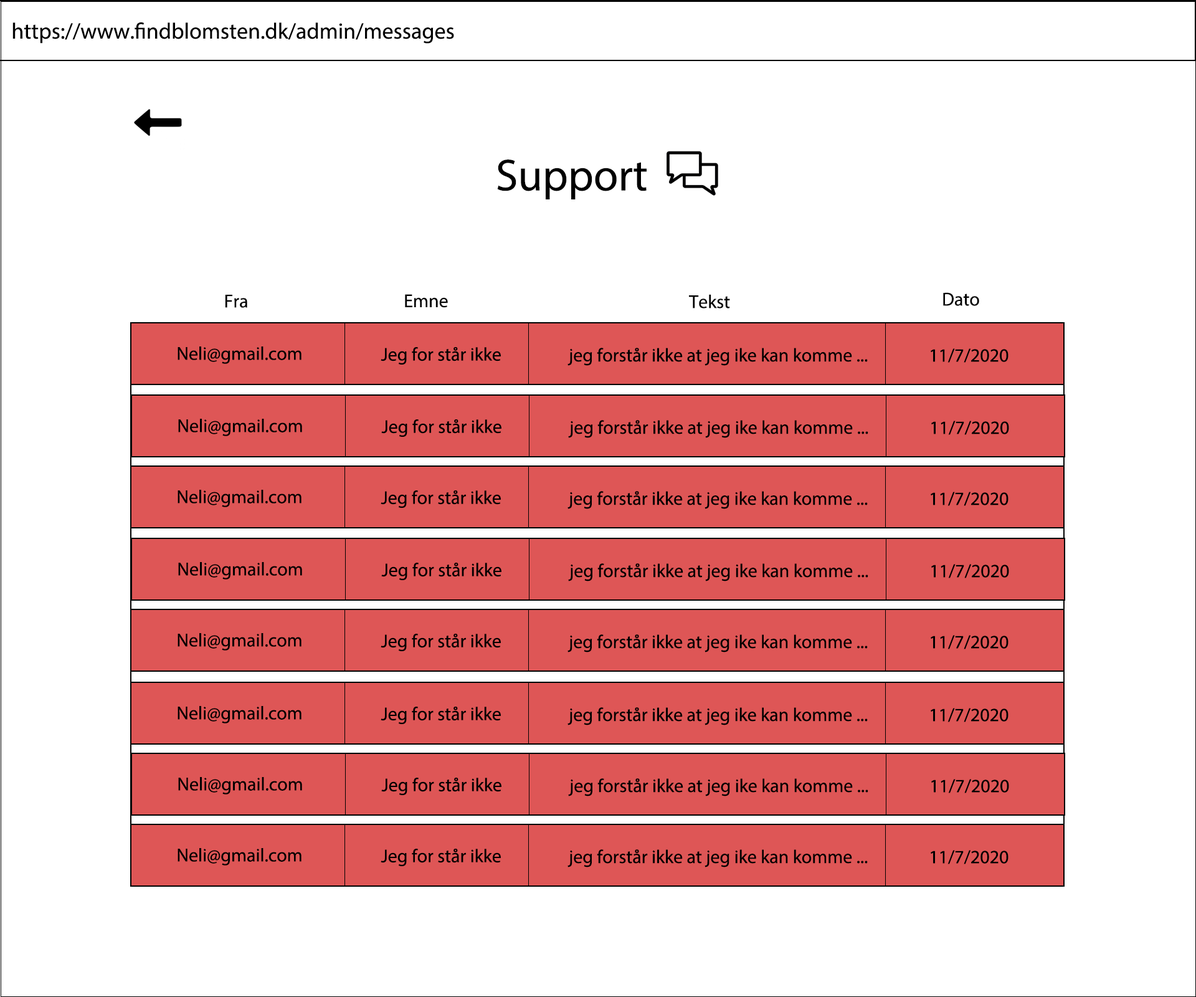
<style>
.page{position:relative;width:1196px;height:997px;background:#ffffff}
.page>*{position:absolute;margin:0}
.t1{font:22.4px "MyriadPro-Regular";color:#000000}
.t2{font:44.9px "MyriadPro-Regular";color:#000000}
.t3{font:18.7px "MyriadPro-Regular";color:#000000}
</style>
<div class="page">
<p class="t1" style="left:12px;top:22px;width:442px;height:22px">https://www.findblomsten.dk/admin/messages</p>
<p class="t2" style="left:497px;top:159px;width:150px;height:40px">Support</p>
<p class="t3" style="left:943px;top:292px;width:36px;height:14px">Dato</p>
<p class="t3" style="left:225px;top:295px;width:22px;height:13px">Fra</p>
<p class="t3" style="left:405px;top:294px;width:43px;height:14px">Emne</p>
<p class="t3" style="left:689px;top:294px;width:41px;height:14px">Tekst</p>
<p class="t3" style="left:178px;top:346px;width:124px;height:18px">Neli@gmail.com</p>
<p class="t3" style="left:381px;top:347px;width:120px;height:18px">Jeg for står ikke</p>
<p class="t3" style="left:568px;top:348px;width:300px;height:18px">jeg forstår ikke at jeg ike kan komme ...</p>
<p class="t3" style="left:931px;top:348px;width:78px;height:15px">11/7/2020</p>
<p class="t3" style="left:178px;top:419px;width:124px;height:17px">Neli@gmail.com</p>
<p class="t3" style="left:381px;top:419px;width:121px;height:18px">Jeg for står ikke</p>
<p class="t3" style="left:568px;top:420px;width:300px;height:18px">jeg forstår ikke at jeg ike kan komme ...</p>
<p class="t3" style="left:931px;top:421px;width:78px;height:14px">11/7/2020</p>
<p class="t3" style="left:178px;top:490px;width:124px;height:17px">Neli@gmail.com</p>
<p class="t3" style="left:381px;top:490px;width:120px;height:18px">Jeg for står ikke</p>
<p class="t3" style="left:568px;top:491px;width:300px;height:18px">jeg forstår ikke at jeg ike kan komme ...</p>
<p class="t3" style="left:931px;top:492px;width:78px;height:14px">11/7/2020</p>
<p class="t3" style="left:178px;top:562px;width:124px;height:17px">Neli@gmail.com</p>
<p class="t3" style="left:381px;top:563px;width:121px;height:18px">Jeg for står ikke</p>
<p class="t3" style="left:568px;top:563px;width:300px;height:18px">jeg forstår ikke at jeg ike kan komme ...</p>
<p class="t3" style="left:931px;top:564px;width:78px;height:14px">11/7/2020</p>
<p class="t3" style="left:178px;top:633px;width:124px;height:17px">Neli@gmail.com</p>
<p class="t3" style="left:381px;top:634px;width:120px;height:18px">Jeg for står ikke</p>
<p class="t3" style="left:568px;top:634px;width:300px;height:18px">jeg forstår ikke at jeg ike kan komme ...</p>
<p class="t3" style="left:931px;top:635px;width:78px;height:14px">11/7/2020</p>
<p class="t3" style="left:178px;top:706px;width:124px;height:17px">Neli@gmail.com</p>
<p class="t3" style="left:381px;top:707px;width:120px;height:18px">Jeg for står ikke</p>
<p class="t3" style="left:568px;top:707px;width:300px;height:18px">jeg forstår ikke at jeg ike kan komme ...</p>
<p class="t3" style="left:931px;top:708px;width:78px;height:14px">11/7/2020</p>
<p class="t3" style="left:178px;top:777px;width:124px;height:17px">Neli@gmail.com</p>
<p class="t3" style="left:381px;top:778px;width:121px;height:18px">Jeg for står ikke</p>
<p class="t3" style="left:568px;top:778px;width:300px;height:18px">jeg forstår ikke at jeg ike kan komme ...</p>
<p class="t3" style="left:931px;top:779px;width:78px;height:14px">11/7/2020</p>
<p class="t3" style="left:178px;top:848px;width:124px;height:17px">Neli@gmail.com</p>
<p class="t3" style="left:381px;top:849px;width:120px;height:18px">Jeg for står ikke</p>
<p class="t3" style="left:568px;top:849px;width:300px;height:18px">jeg forstår ikke at jeg ike kan komme ...</p>
<p class="t3" style="left:931px;top:850px;width:78px;height:14px">11/7/2020</p>
</div>
